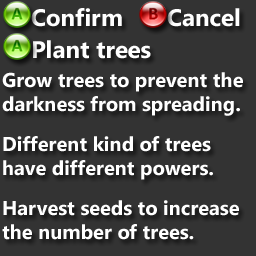
<style>
.page{position:relative;width:256px;height:256px;background:#333333}
.page>*{position:absolute;margin:0}
.t1{font:24px "SegoeUI-Bold";color:#ffffff}
.t2{font:20px "SegoeUI-Bold";color:#ffffff}
</style>
<div class="page">
<p class="t1" style="left:31px;top:8px;width:91px;height:19px">Confirm</p>
<p class="t1" style="left:167px;top:8px;width:73px;height:19px">Cancel</p>
<p class="t1" style="left:33px;top:40px;width:118px;height:19px">Plant trees</p>
<p class="t2" style="left:2px;top:72px;width:241px;height:44px">Grow trees to prevent the<br>darkness from spreading.</p>
<p class="t2" style="left:3px;top:136px;width:210px;height:44px">Different kind of trees<br>have different powers.</p>
<p class="t2" style="left:2px;top:200px;width:237px;height:40px">Harvest seeds to increase<br>the number of trees.</p>
</div>
